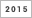
<style>
.page{position:relative;width:32px;height:18px;background:#ffffff}
.page>*{position:absolute;margin:0}
.t1{font:8px "Roboto-Bold";letter-spacing:0.16em;color:#454545}
</style>
<div class="page">
<p class="t1" style="left:5px;top:6px;width:23px;height:7px">2015</p>
</div>
